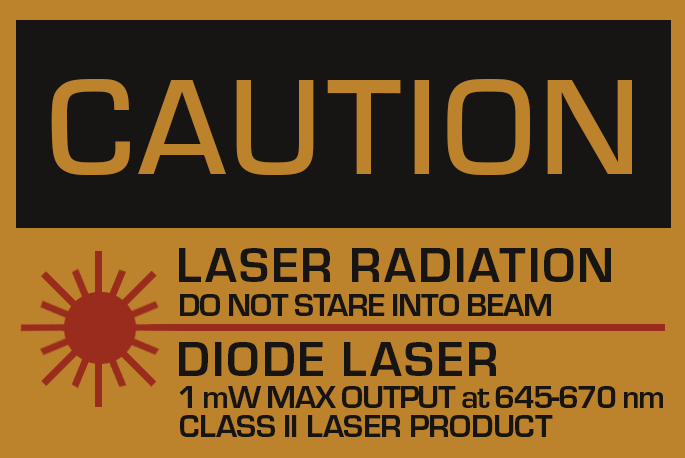
<style>
.page{position:relative;width:685px;height:458px;background:#bc832c}
.page>*{position:absolute;margin:0}
.t1{font:141.7px "Eurostile-Med";letter-spacing:0.028em;color:#bc832c}
.t2{font:50px "Eurostile-Bol";letter-spacing:0.04em;color:#171513}
.t3{font:33.3px "Eurostile-Bol";letter-spacing:-0.04em;color:#171513}
.t4{font:33.3px "Eurostile-Bol";letter-spacing:-0.05em;color:#171513}
.t5{font:33.3px "Eurostile-Bol";letter-spacing:-0.02em;color:#171513}
</style>
<div class="page">
<p class="t1" style="left:51px;top:78px;width:581px;height:97px">CAUTION</p>
<p class="t2" style="left:179px;top:248px;width:432px;height:34px">LASER RADIATION</p>
<p class="t3" style="left:180px;top:294px;width:371px;height:22px">DO NOT STARE INTO BEAM</p>
<p class="t2" style="left:179px;top:342px;width:317px;height:34px">DIODE LASER</p>
<p class="t4" style="left:179px;top:386px;width:484px;height:22px">1 mW MAX OUTPUT at 645-670 nm</p>
<p class="t5" style="left:180px;top:415px;width:373px;height:22px">CLASS II LASER PRODUCT</p>
</div>
